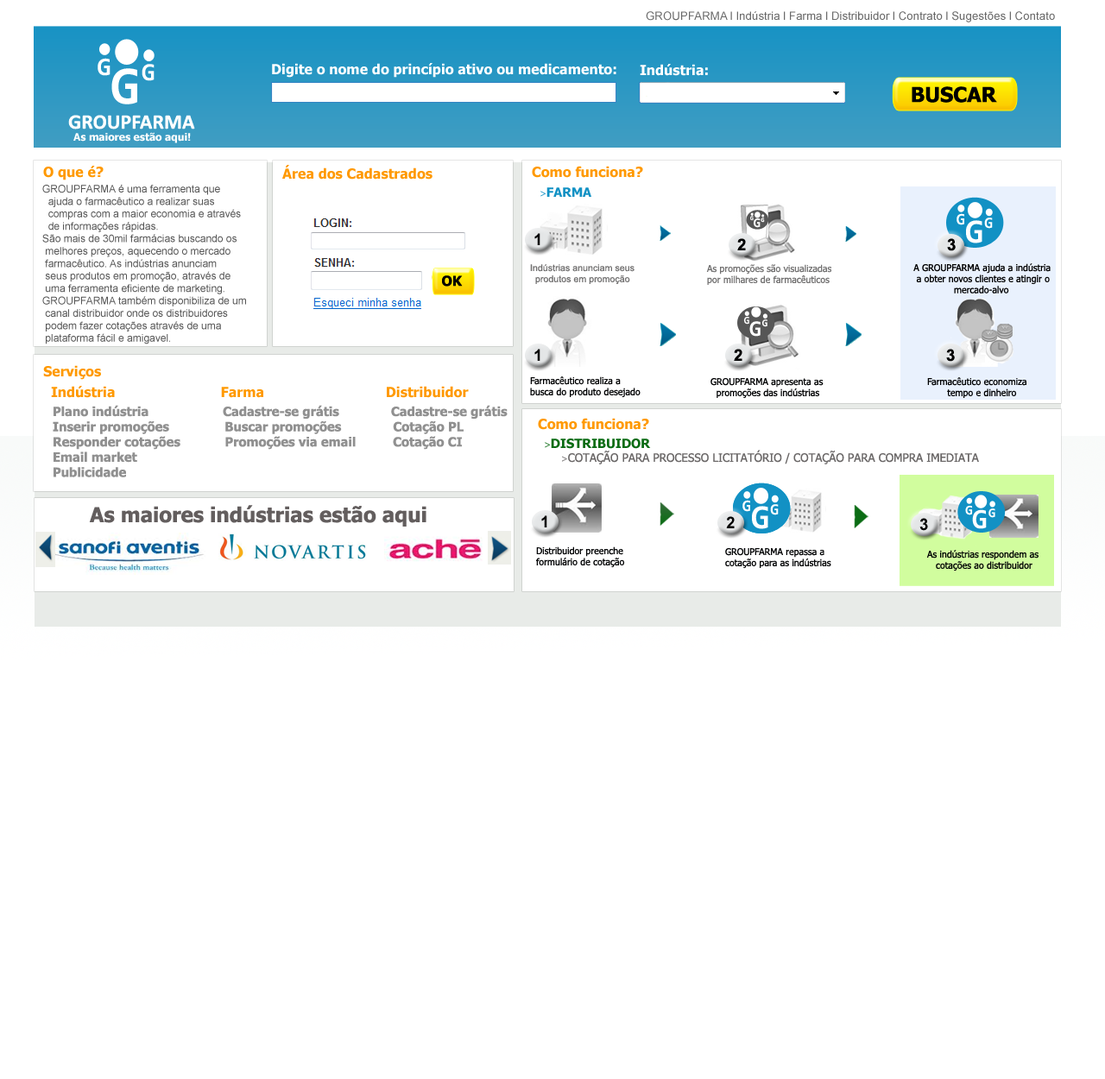
<style>
.page{position:relative;width:1105px;height:1079px;background:#ffffff}
.page>*{position:absolute;margin:0}
.t1{font:11.5px "ArialMT";color:#6a6a6a}
.t2{font:25.6px "Consolas-Bold";color:#ffffff}
.t3{font:24.9px "Consolas-Bold";color:#ffffff}
.t4{font:13.8px "Tahoma-Bold";color:#ffffff}
.t5{font:54px "Consolas-Bold";color:#ffffff}
.t6{font:20.7px "Tahoma-Bold";color:#000000}
.t7{font:20.7px "Calibri-Bold";color:#ffffff}
.t8{font:10.4px "Tahoma-Bold";color:#fdfdfd}
.t9{font:13.8px "Tahoma-Bold";color:#ff9900}
.t10{font:10.4px "ArialMT";color:#545454}
.t11{font:12.7px "Tahoma-Bold";color:#1291c4}
.t12{font:9.2px "Tahoma";color:#1291c4}
.t13{font:6.2px "Consolas-Bold";color:#ffffff}
.t14{font:13.2px "Consolas-Bold";color:#ffffff}
.t15{font:6.1px "Consolas-Bold";color:#ffffff}
.t16{font:16.2px "Consolas-Bold";color:#ffffff}
.t17{font:34.2px "Consolas-Bold";color:#ffffff}
.t18{font:15.8px "Consolas-Bold";color:#ffffff}
.t19{font:16.1px "Arial-BoldMT";color:#000000}
.t20{font:9.2px "ArialMT";color:#717070}
.t21{font:9.2px "Tahoma";color:#717070}
.t22{font:9.2px "Tahoma";color:#000000}
.t23{font:13.8px "Tahoma-Bold";color:#000000}
.t24{font:10.5px "Consolas-Bold";color:#ffffff}
.t25{font:22.2px "Consolas-Bold";color:#ffffff}
.t26{font:10.3px "Consolas-Bold";color:#ffffff}
.t27{font:9.2px "Tahoma";color:#000102}
.t28{font:12.7px "Tahoma-Bold";color:#909090}
.t29{font:12.7px "Tahoma-Bold";color:#0b6c14}
.t30{font:9.2px "Tahoma";color:#0b6c14}
.t31{font:11.5px "Tahoma";color:#6a6767}
.t32{font:9.2px "Tahoma";color:#959393}
.t33{font:20.7px "Tahoma-Bold";color:#635e5e}
.t34{font:13.4px "Consolas-Bold";color:#ffffff}
.t35{font:28.2px "Consolas-Bold";color:#ffffff}
.t36{font:13px "Consolas-Bold";color:#ffffff}
</style>
<div class="page">
<p class="t1" style="left:646px;top:11px;width:409px;height:11px">GROUPFARMA l Indústria l Farma l Distribuidor l Contrato l Sugestões l Contato</p>
<p class="t2" style="left:98px;top:58px;width:13px;height:18px">G</p>
<p class="t3" style="left:142px;top:64px;width:13px;height:17px">G</p>
<p class="t4" style="left:272px;top:63px;width:344px;height:15px">Digite o nome do princípio ativo ou medicamento:</p>
<p class="t4" style="left:640px;top:64px;width:68px;height:12px">Indústria:</p>
<p class="t5" style="left:111px;top:68px;width:26px;height:36px">G</p>
<p class="t6" style="left:912px;top:86px;width:85px;height:17px">BUSCAR</p>
<p class="t7" style="left:68px;top:115px;width:127px;height:14px">GROUPFARMA</p>
<p class="t8" style="left:73px;top:132px;width:118px;height:11px">As maiores estão aqui!</p>
<p class="t9" style="left:43px;top:166px;width:61px;height:14px">O que é?</p>
<p class="t9" style="left:282px;top:165px;width:151px;height:15px">Área dos Cadastrados</p>
<p class="t9" style="left:532px;top:166px;width:111px;height:12px">Como funciona?</p>
<p class="t10" style="left:42px;top:185px;width:204px;height:159px">GROUPFARMA é uma ferramenta que <br>  ajuda o farmacêutico a realizar suas<br>  compras com a maior economia e através <br>  de informações rápidas.<br>São mais de 30mil farmácias buscando os<br> melhores preços, aquecendo o mercado<br> farmacêutico. As indústrias anunciam<br> seus produtos em promoção, através de<br> uma ferramenta eficiente de marketing.<br>GROUPFARMA também disponibiliza de um<br> canal distribuidor onde os distribuidores  <br> podem fazer cotações através de uma <br> plataforma fácil e amigavel.</p>
<p class="t11" style="left:540px;top:187px;width:51px;height:10px"><span class="t12">&gt;</span>FARMA</p>
<p class="t13" style="left:750px;top:216px;width:4px;height:5px">G</p>
<p class="t14" style="left:753px;top:218px;width:8px;height:10px">G</p>
<p class="t15" style="left:761px;top:218px;width:4px;height:5px">G</p>
<p class="t16" style="left:957px;top:213px;width:7px;height:12px">G</p>
<p class="t17" style="left:966px;top:220px;width:16px;height:23px">G</p>
<p class="t18" style="left:984px;top:218px;width:9px;height:11px">G</p>
<p class="t19" style="left:534px;top:233px;width:6px;height:12px">1</p>
<p class="t19" style="left:737px;top:238px;width:9px;height:12px">2</p>
<p class="t19" style="left:947px;top:238px;width:9px;height:13px">3</p>
<p class="t20" style="left:530px;top:264px;width:105px;height:20px">Indústrias anunciam seus<br>  produtos em promoção</p>
<p class="t21" style="left:706px;top:264px;width:125px;height:21px">As promoções são visualizadas<br>por milhares de farmacêuticos</p>
<p class="t22" style="left:913px;top:263px;width:138px;height:31px">A GROUPFARMA ajuda a indústria <br>  a obter novos clientes e atingir o <br>               mercado-alvo</p>
<p class="t23" style="left:442px;top:275px;width:21px;height:12px">OK</p>
<p class="t24" style="left:743px;top:316px;width:6px;height:9px">G</p>
<p class="t25" style="left:749px;top:321px;width:12px;height:16px">G</p>
<p class="t26" style="left:761px;top:319px;width:6px;height:8px">G</p>
<p class="t19" style="left:534px;top:349px;width:6px;height:12px">1</p>
<p class="t19" style="left:734px;top:349px;width:8px;height:12px">2</p>
<p class="t19" style="left:946px;top:349px;width:9px;height:13px">3</p>
<p class="t9" style="left:43px;top:365px;width:58px;height:15px">Serviços</p>
<p class="t27" style="left:530px;top:376px;width:111px;height:22px">Farmacêutico realiza a<br>busca do produto desejado</p>
<p class="t27" style="left:927px;top:377px;width:99px;height:21px">Farmacêutico economiza<br>       tempo e dinheiro</p>
<p class="t9" style="left:51px;top:386px;width:418px;height:12px">Indústria                          Farma                              Distribuidor</p>
<p class="t27" style="left:710px;top:378px;width:114px;height:21px">GROUPFARMA apresenta as<br>     promoções das indústrias</p>
<p class="t28" style="left:53px;top:405px;width:455px;height:72px">Plano indústria                    Cadastre-se grátis              Cadastre-se grátis<br>Inserir promoções               Buscar promoções              Cotação PL<br>Responder cotações            Promoções via email          Cotação CI<br>Email market<br>Publicidade</p>
<p class="t9" style="left:538px;top:418px;width:111px;height:12px">Como funciona?</p>
<p class="t29" style="left:545px;top:439px;width:106px;height:10px"><span class="t30">&gt;</span>DISTRIBUIDOR</p>
<p class="t31" style="left:562px;top:450px;width:417px;height:14px"><span class="t32">&gt;</span>COTAÇÃO PARA PROCESSO LICITATÓRIO / COTAÇÃO PARA COMPRA IMEDIATA</p>
<p class="t33" style="left:89px;top:505px;width:337px;height:22px">As maiores indústrias estão aqui</p>
<p class="t16" style="left:742px;top:500px;width:8px;height:12px">G</p>
<p class="t16" style="left:742px;top:500px;width:8px;height:12px">G</p>
<p class="t17" style="left:752px;top:506px;width:16px;height:23px">G</p>
<p class="t17" style="left:752px;top:506px;width:16px;height:23px">G</p>
<p class="t18" style="left:770px;top:504px;width:9px;height:11px">G</p>
<p class="t18" style="left:770px;top:504px;width:9px;height:11px">G</p>
<p class="t34" style="left:965px;top:505px;width:8px;height:10px">G</p>
<p class="t35" style="left:972px;top:509px;width:15px;height:20px">G</p>
<p class="t36" style="left:988px;top:508px;width:7px;height:10px">G</p>
<p class="t19" style="left:541px;top:515px;width:6px;height:12px">1</p>
<p class="t19" style="left:726px;top:516px;width:9px;height:12px">2</p>
<p class="t19" style="left:919px;top:518px;width:9px;height:13px">3</p>
<p class="t27" style="left:536px;top:546px;width:89px;height:22px">Distribuidor preenche<br>formulário de cotação</p>
<p class="t27" style="left:725px;top:548px;width:106px;height:21px">GROUPFARMA repassa a<br>cotação para as indústrias</p>
<p class="t27" style="left:926px;top:550px;width:113px;height:21px">As indústrias respondem as <br>   cotações ao distribuidor</p>
</div>
